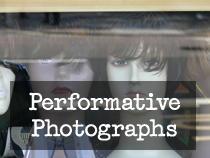
<style>
.page{position:relative;width:210px;height:158px}
.page>*{position:absolute;margin:0}
.t1{font:22px "Passport";color:#ffffff}
</style>
<div class="page">
<p class="t1" style="left:29px;top:92px;width:152px;height:49px;text-align:center">Performative<br>Photographs</p>
</div>
